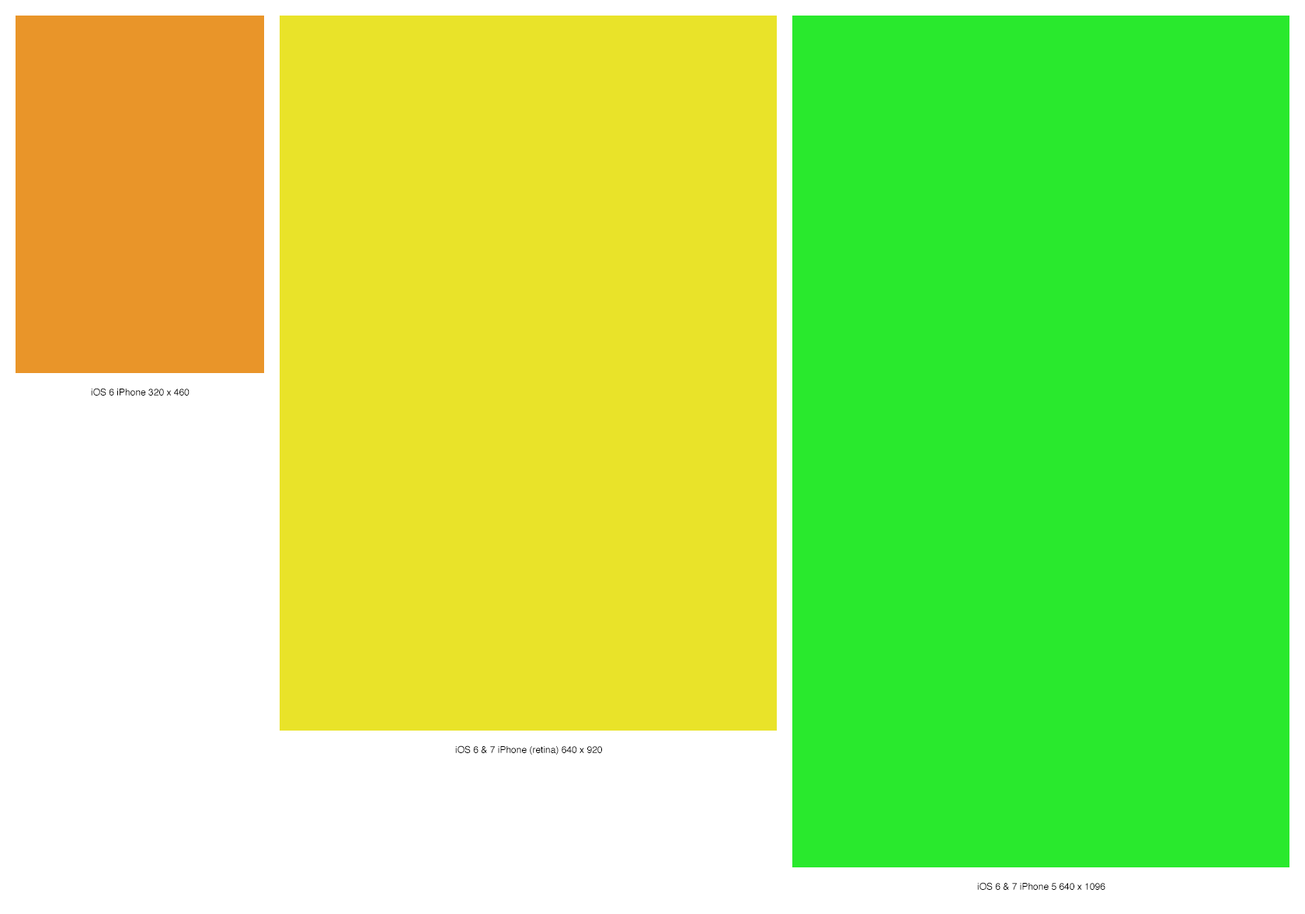
<style>
.page{position:relative;width:1305px;height:914px;background:#29e92d}
.page>*{position:absolute;margin:0}
.t1{font:9.3px "Helvetica";color:#000000}
</style>
<div class="page">
<p class="t1" style="left:91px;top:388px;width:99px;height:7px">iOS 6 iPhone 320 x 460</p>
<p class="t1" style="left:455px;top:745px;width:147px;height:9px">iOS 6 &amp; 7 iPhone (retina) 640 x 920</p>
<p class="t1" style="left:977px;top:882px;width:129px;height:8px">iOS 6 &amp; 7 iPhone 5 640 x 1096</p>
</div>
